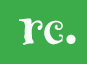
<style>
.page{position:relative;width:87px;height:64px;background:#3cab49}
.page>*{position:absolute;margin:0}
.t1{font:60px "ARHERMANN";color:#f5fbf6}
</style>
<div class="page">
<p class="t1" style="left:19px;top:18px;width:57px;height:27px">rc.</p>
</div>
